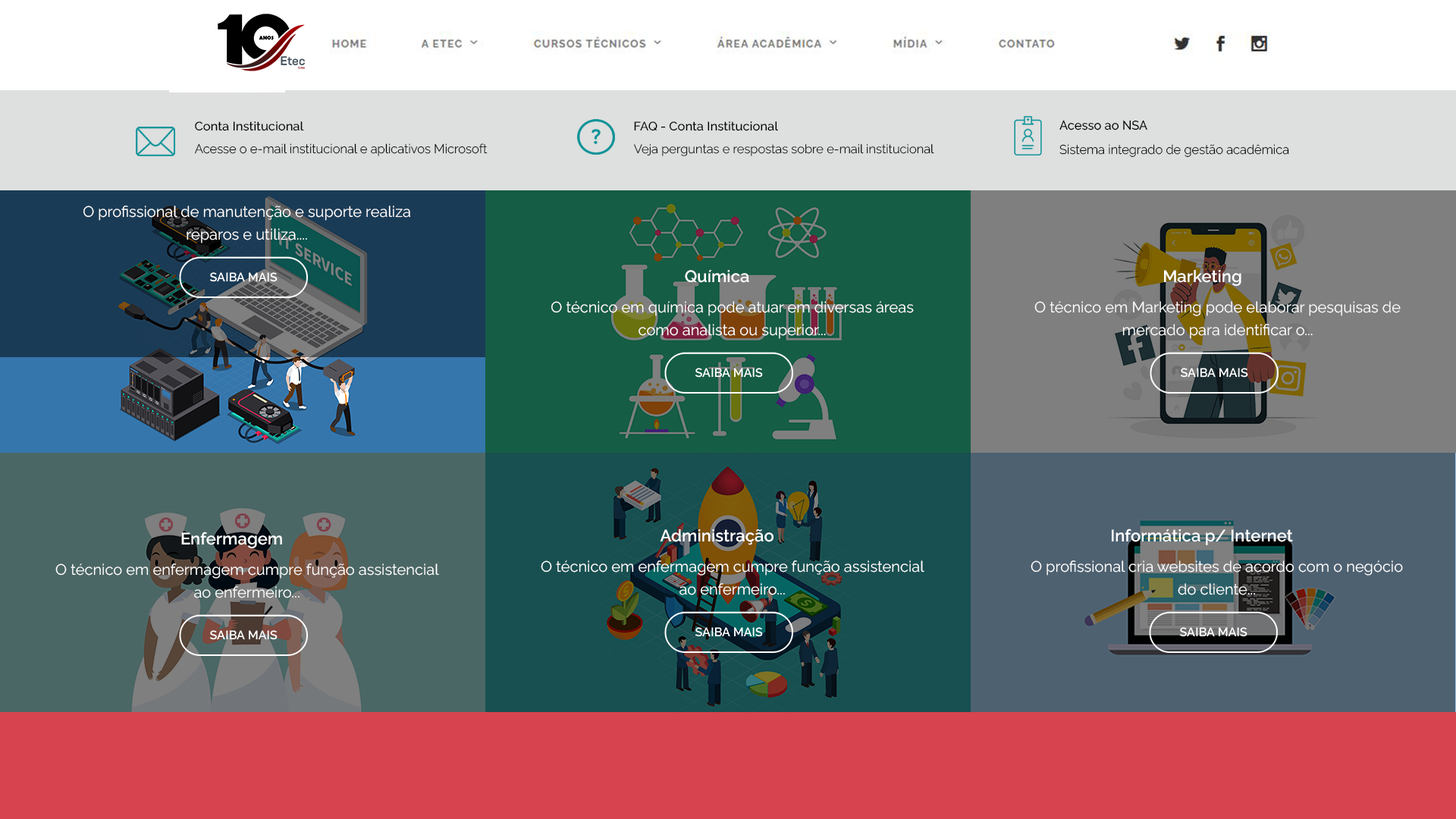
<style>
.page{position:relative;width:1456px;height:819px}
.page>*{position:absolute;margin:0}
.t1{font:12.4px "Raleway-Medium";color:#000000}
.t2{font:12.7px "Raleway-Medium";color:#000000}
.t3{font:12.7px "Raleway-Light";color:#000000}
.t4{font:12.4px "Raleway-Light";color:#000000}
.t5{font:15.1px/22.7px "Raleway-Regular";color:#ffffff}
.t6{font:16.7px "Raleway-SemiBold";color:#ffffff}
</style>
<div class="page">
<p class="t1" style="left:195px;top:121px;width:109px;height:10px">Conta Institucional</p>
<p class="t1" style="left:634px;top:121px;width:144px;height:10px">FAQ - Conta Institucional</p>
<p class="t2" style="left:1059px;top:120px;width:88px;height:10px">Acesso ao NSA</p>
<p class="t3" style="left:195px;top:143px;width:293px;height:13px">Acesse o e-mail institucional e aplicativos Microsoft</p>
<p class="t4" style="left:634px;top:144px;width:300px;height:12px">Veja perguntas e respostas sobre e-mail institucional</p>
<p class="t3" style="left:1059px;top:144px;width:230px;height:13px">Sistema integrado de gestão acadêmica</p>
<p class="t5" style="left:83px;top:206px;width:328px;height:37px;text-align:center">O profissional de manutenção e suporte realiza<br>reparos e utiliza....</p>
<p class="t6" style="left:685px;top:270px;width:64px;height:13px">Química</p>
<p class="t6" style="left:1164px;top:270px;width:77px;height:16px">Marketing</p>
<p class="t5" style="left:551px;top:301px;width:363px;height:38px;text-align:center">O técnico em química pode atuar em diversas áreas<br>como analista ou superior...</p>
<p class="t5" style="left:1034px;top:301px;width:367px;height:38px;text-align:center">O técnico em Marketing pode elaborar pesquisas de<br>mercado para identificar o...</p>
<p class="t6" style="left:181px;top:532px;width:101px;height:16px">Enfermagem</p>
<p class="t6" style="left:660px;top:529px;width:113px;height:16px">Administração</p>
<p class="t6" style="left:1112px;top:529px;width:181px;height:16px">Informática p/ Internet</p>
<p class="t5" style="left:55px;top:563px;width:384px;height:35px;text-align:center">O técnico em enfermagem cumpre função assistencial<br>ao enfermeiro...</p>
<p class="t5" style="left:541px;top:560px;width:383px;height:35px;text-align:center">O técnico em enfermagem cumpre função assistencial<br>ao enfermeiro...</p>
<p class="t5" style="left:1031px;top:560px;width:372px;height:35px;text-align:center">O profissional cria websites de acordo com o negócio<br>do cliente...</p>
</div>
